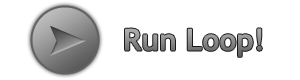
<style>
.page{position:relative;width:300px;height:80px;background:#ffffff}
.page>*{position:absolute;margin:0}
.t1{font:30px "TrebuchetMS-Bold"}
</style>
<div class="page">
<p class="t1" style="left:125px;top:28px;width:137px;height:29px">Run Loop!</p>
</div>
